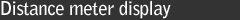
<style>
.page{position:relative;width:240px;height:20px;background:#333333}
.page>*{position:absolute;margin:0}
.t1{font:19px "BellGothicStd-Bold";letter-spacing:-0.025em;color:#ffffff}
</style>
<div class="page">
<p class="t1" style="left:1px;top:0px;width:170px;height:19px">Distance meter display</p>
</div>
